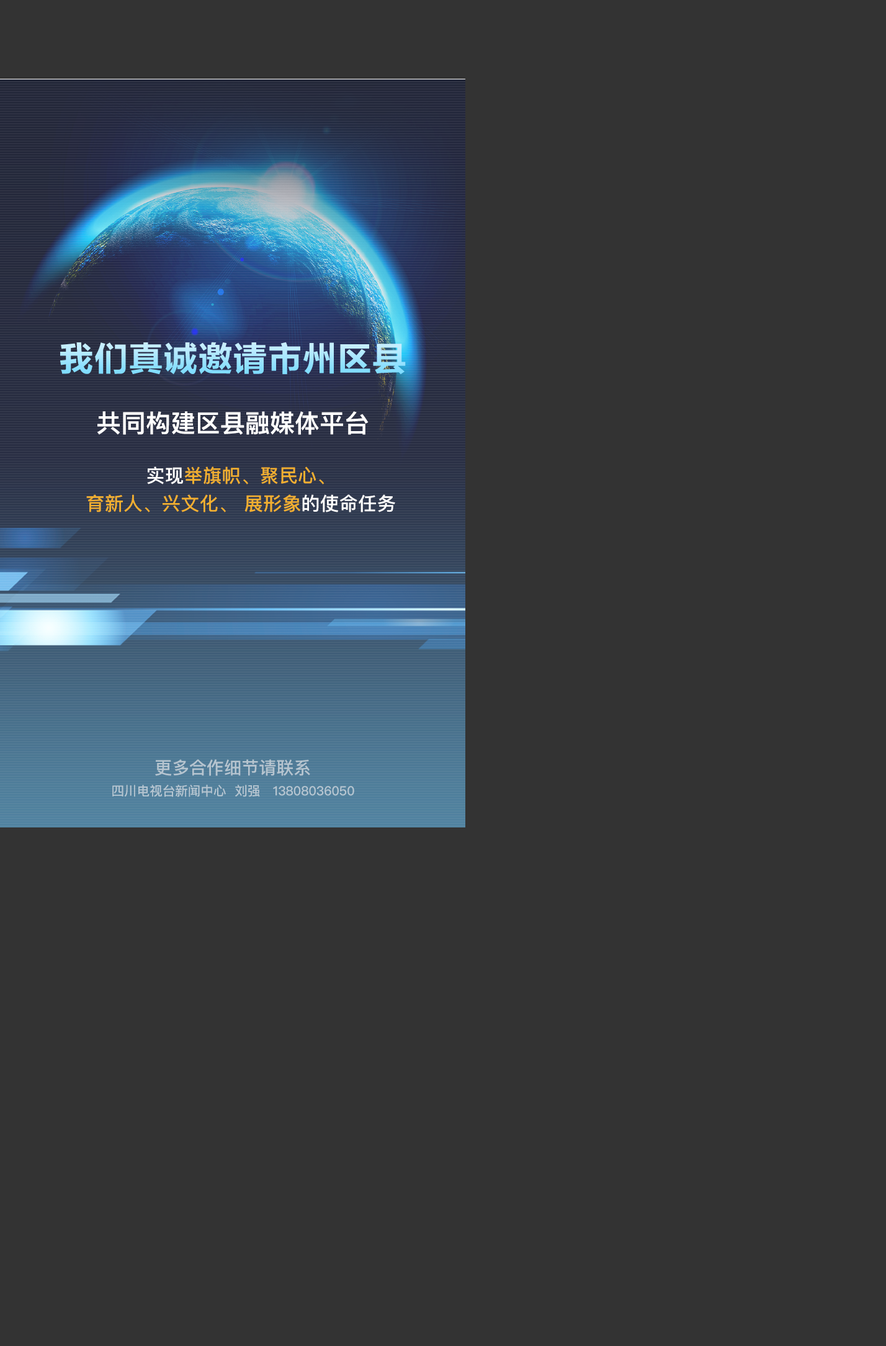
<style>
.page{position:relative;width:886px;height:1346px;background:#333333}
.page>*{position:absolute;margin:0}
.t1{font:24.8px "PingFangSC-Semibold";color:#ffffff}
.t2{font:18.6px/27.9px "PingFangSC-Medium";letter-spacing:0.02em;color:#f1af30}
.t3{font:18.6px/27.9px "PingFangSC-Medium";letter-spacing:0.02em;color:#ffffff}
.t4{font:17.4px "PingFangSC-Medium";color:#b5c4cf}
.t5{font:12.7px "PingFangSC-Medium";color:#b5c5d1}
</style>
<div class="page">
<p class="t1" style="left:97px;top:411px;width:271px;height:24px">共同构建区县融媒体平台</p>
<p class="t2" style="left:86px;top:466px;width:309px;height:46px;text-align:center"><span class="t3">实现</span>举旗帜、聚民心、<br>育新人、兴文化、 展形象<span class="t3">的使命任务</span></p>
<p class="t4" style="left:155px;top:759px;width:155px;height:17px">更多合作细节请联系</p>
<p class="t5" style="left:112px;top:785px;width:242px;height:12px">四川电视台新闻中心  刘强   13808036050</p>
</div>
